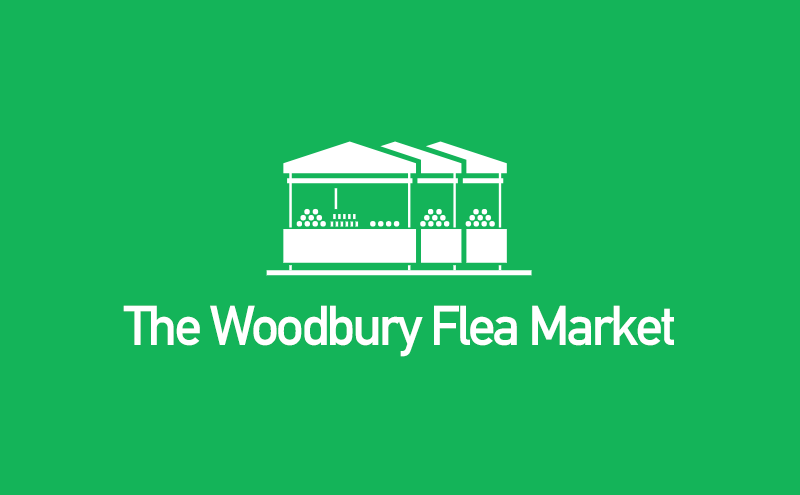
<style>
.page{position:relative;width:800px;height:495px;background:#14b459}
.page>*{position:absolute;margin:0}
.t1{font:55px "DINAlternate-Bold";letter-spacing:-0.05em;color:#ffffff}
</style>
<div class="page">
<p class="t1" style="left:123px;top:305px;width:551px;height:52px">The Woodbury Flea Market</p>
</div>
